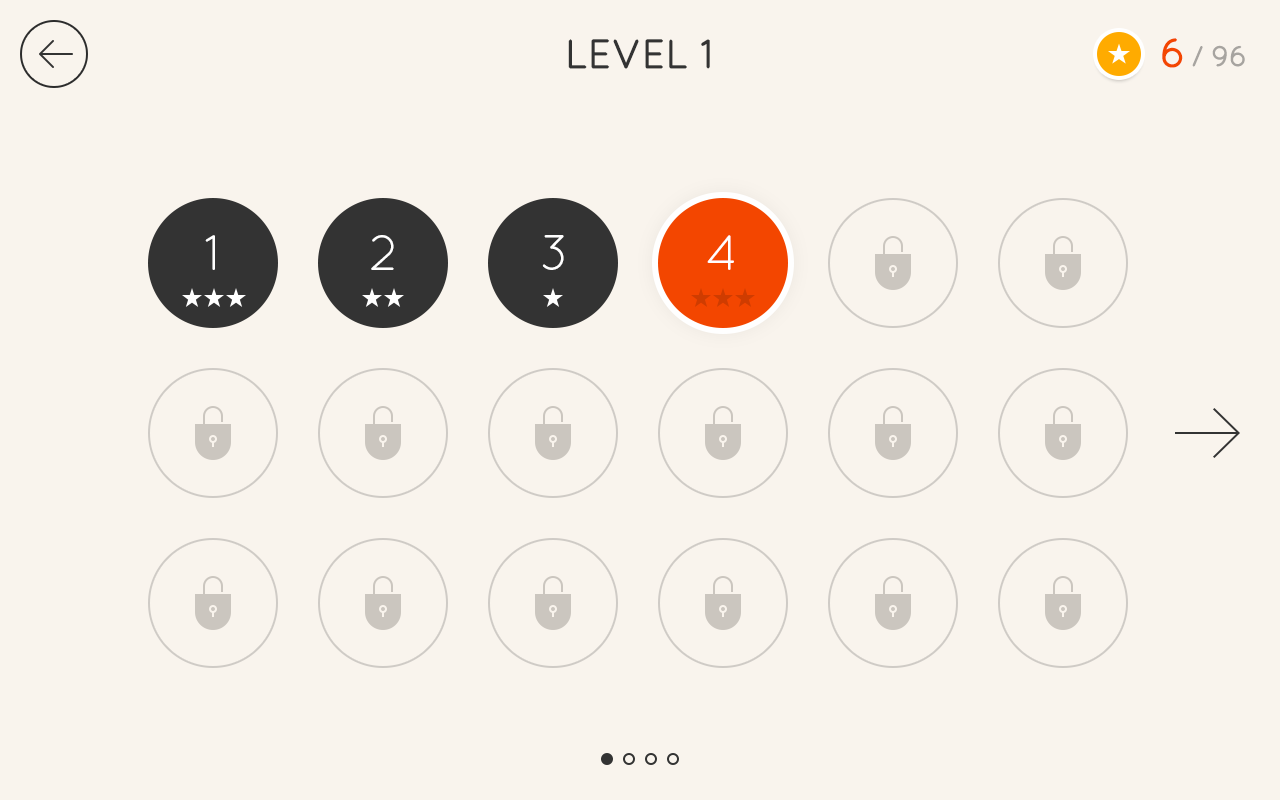
<style>
.page{position:relative;width:1280px;height:800px;background:#f9f4ed}
.page>*{position:absolute;margin:0}
.t1{font:40px "QuicksandBook-Regular";letter-spacing:-0.025em;color:#333333;text-transform:uppercase;font-weight:bold}
.t2{font:40px "QuicksandBook-Regular";letter-spacing:-0.025em;color:#f34600;text-transform:uppercase;font-weight:bold}
.t3{font:28px "QuicksandBook-Regular";letter-spacing:-0.025em;color:#a7a4a0;text-transform:uppercase;font-weight:bold}
.t4{font:50px "QuicksandBook-Regular";letter-spacing:-0.025em;color:#ffffff;text-transform:uppercase}
</style>
<div class="page">
<p class="t1" style="left:568px;top:39px;width:142px;height:30px">level 1</p>
<p class="t2" style="left:1162px;top:38px;width:21px;height:30px">6</p>
<p class="t3" style="left:1192px;top:45px;width:53px;height:22px">/ 96</p>
<p class="t4" style="left:205px;top:235px;width:10px;height:35px">1</p>
<p class="t4" style="left:371px;top:235px;width:23px;height:35px">2</p>
<p class="t4" style="left:542px;top:235px;width:22px;height:35px">3</p>
<p class="t4" style="left:707px;top:235px;width:27px;height:35px">4</p>
</div>
